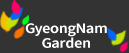
<style>
.page{position:relative;width:129px;height:53px;background:#333333}
.page>*{position:absolute;margin:0}
.t1{font:13px/14.5px "NotoSansCJKkr-Bold";letter-spacing:-0.025em;color:#ffffff;scale:1.11 1}
</style>
<div class="page">
<p class="t1" style="left:25px;top:23px;width:82px;height:25px;text-align:center">GyeongNam<br>Garden</p>
</div>
